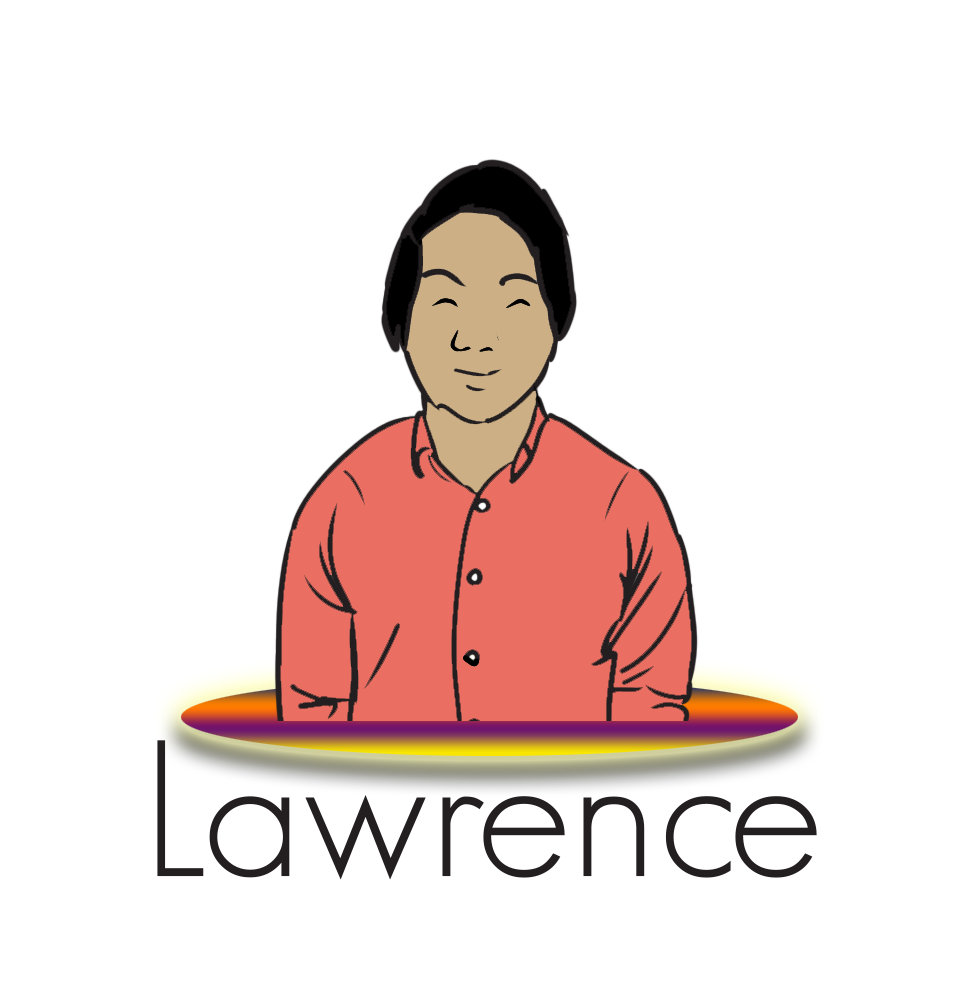
<style>
.page{position:relative;width:957px;height:1008px;background:#ffffff}
.page>*{position:absolute;margin:0}
.t1{font:190.3px "GeosansLight";color:#231f20}
</style>
<div class="page">
<p class="t1" style="left:157px;top:740px;width:660px;height:140px">Lawrence</p>
</div>
